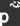
<style>
.page{position:relative;width:20px;height:26px;background:#333333}
.page>*{position:absolute;margin:0}
.t1{font:12px "DFKaiShu-SB-Estd-BF";color:#ffffff;font-weight:bold}
.t2{font:18px "ArialMT";color:#ffffff;font-weight:bold}
</style>
<div class="page">
<p class="t1" style="left:10px;top:1px;width:10px;height:7px">心</p>
<p class="t2" style="left:0px;top:12px;width:9px;height:15px">p</p>
</div>
